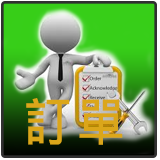
<style>
.page{position:relative;width:160px;height:160px}
.page>*{position:absolute;margin:0}
.t1{font:52.9px "MicrosoftJhengHeiBold";letter-spacing:0.08em;color:#dba71b;scale:0.93 1}
</style>
<div class="page">
<p class="t1" style="left:26px;top:98px;width:97px;height:47px">訂單</p>
</div>
